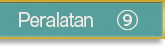
<style>
.page{position:relative;width:165px;height:47px;background:#579f9c}
.page>*{position:absolute;margin:0}
.t1{font:18px "GothicMB101Pro-Regular";letter-spacing:-0.04em;color:#f2ebe5;scale:0.9 1}
</style>
<div class="page">
<p class="t1" style="left:19px;top:12px;width:74px;height:15px">Peralatan</p>
</div>
